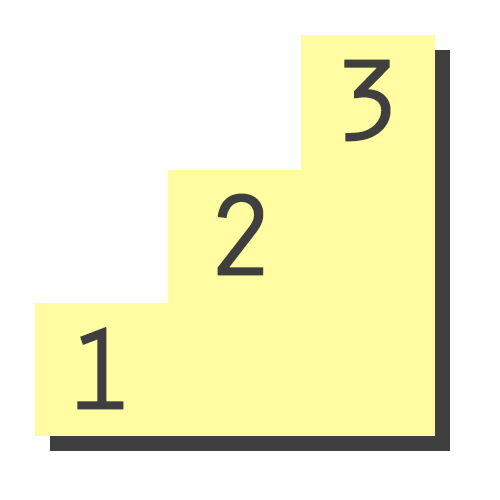
<style>
.page{position:relative;width:500px;height:500px;background:#ffffff}
.page>*{position:absolute;margin:0}
.t1{font:120px "OratorStd";color:#3f3f3f;font-weight:bold}
</style>
<div class="page">
<p class="t1" style="left:344px;top:59px;width:47px;height:83px">3</p>
<p class="t1" style="left:217px;top:193px;width:47px;height:83px">2</p>
<p class="t1" style="left:77px;top:327px;width:47px;height:83px">1</p>
</div>
